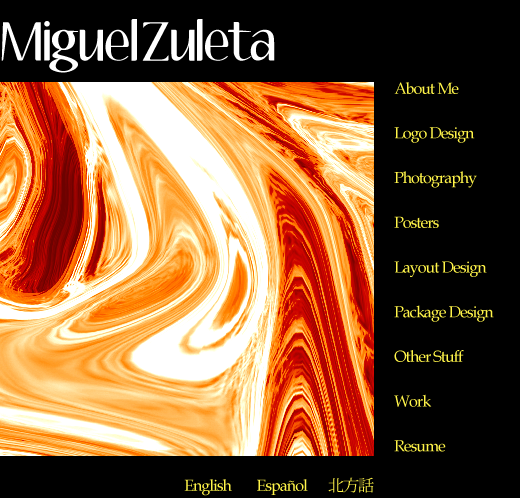
<style>
.page{position:relative;width:520px;height:498px;background:#000000}
.page>*{position:absolute;margin:0}
.t1{font:48px "Aubrey";letter-spacing:-0.06em;color:#ffffff}
.t2{font:16px/44.7px "BookAntiqua";letter-spacing:-0.06em;color:#fff449}
.t3{font:16px "BookAntiqua";letter-spacing:-0.06em;color:#fff449}
.t4{font:16px "KozMinStd-Regular";letter-spacing:-0.06em;color:#fff449}
</style>
<div class="page">
<p class="t1" style="left:1px;top:19px;width:274px;height:54px">Miguel Zuleta</p>
<p class="t2" style="left:394px;top:82px;width:100px;height:370px">About Me<br>Logo Design<br>Photography<br>Posters<br>Layout Design<br>Package Design<br>Other Stuff<br>Work<br>Resume</p>
<p class="t3" style="left:184px;top:479px;width:48px;height:17px">English</p>
<p class="t3" style="left:257px;top:479px;width:51px;height:16px">Español</p>
<p class="t4" style="left:328px;top:477px;width:46px;height:16px">北方話</p>
</div>
